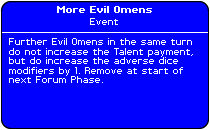
<style>
.page{position:relative;width:210px;height:130px;background:#0000ff}
.page>*{position:absolute;margin:0}
.t1{font:8px "PFTempestaSeven-Bold";color:#ffffff}
.t2{font:8px "PFTempestaSeven";color:#ffffff}
</style>
<div class="page">
<p class="t1" style="left:57px;top:6px;width:95px;height:7px">More Evil Omens</p>
<p class="t2" style="left:90px;top:18px;width:28px;height:7px">Event</p>
<p class="t2" style="left:9px;top:38px;width:184px;height:45px">Further Evil Omens in the same turn<br>do not increase the Talent payment,<br>but do increase the adverse dice<br>modifiers by 1. Remove at start of<br>next Forum Phase.</p>
</div>
